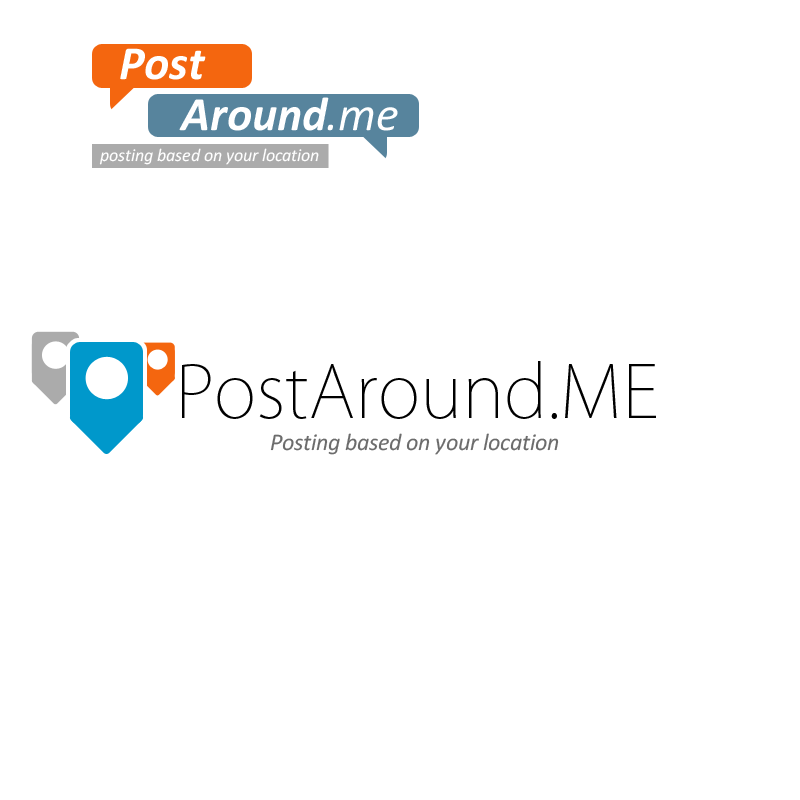
<style>
.page{position:relative;width:800px;height:800px;background:#ffffff}
.page>*{position:absolute;margin:0}
.t1{font:48px "Calibri-BoldItalic";color:#ffffff}
.t2{font:48px "Calibri-Italic";color:#ffffff}
.t3{font:18px "Calibri-Italic";color:#ffffff}
.t4{font:72px "KozGoPro-ExtraLight";color:#000000}
.t5{font:24px "Calibri-Italic";color:#6c6c6c}
</style>
<div class="page">
<p class="t1" style="left:120px;top:48px;width:86px;height:32px">Post</p>
<p class="t1" style="left:179px;top:97px;width:150px;height:34px">Around</p>
<p class="t2" style="left:327px;top:107px;width:71px;height:24px">.me</p>
<p class="t3" style="left:99px;top:148px;width:220px;height:17px">posting based on your location</p>
<p class="t4" style="left:182px;top:361px;width:474px;height:58px">PostAround.ME</p>
<p class="t5" style="left:270px;top:433px;width:289px;height:22px">Posting based on your location</p>
</div>
